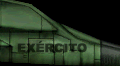
<style>
.page{position:relative;width:120px;height:66px;background:#000000}
.page>*{position:absolute;margin:0}
.t1{font:12px "Arial-Black";color:#1c2819;text-transform:uppercase;font-weight:bold}
</style>
<div class="page">
<p class="t1" style="left:17px;top:41px;width:70px;height:12px">EXÉRCITO</p>
</div>
